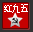
<style>
.page{position:relative;width:33px;height:32px;background:#c50000}
.page>*{position:absolute;margin:0}
.t1{font:10.4px "SimSun";letter-spacing:-0.25em;color:#ffffff}
</style>
<div class="page">
<p class="t1" style="left:4px;top:4px;width:24px;height:9px">红九五</p>
</div>
